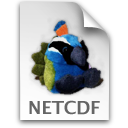
<style>
.page{position:relative;width:128px;height:128px;background:#ffffff}
.page>*{position:absolute;margin:0}
.t1{font:18px "LucidaGrande-Bold";letter-spacing:-0.02em;color:#656565}
</style>
<div class="page">
<p class="t1" style="left:29px;top:100px;width:71px;height:15px">NETCDF</p>
</div>
